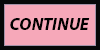
<style>
.page{position:relative;width:100px;height:50px;background:#f6a8b9}
.page>*{position:absolute;margin:0}
.t1{font:17.4px "MyriadPro-BoldIt";color:#000000}
</style>
<div class="page">
<p class="t1" style="left:10px;top:18px;width:80px;height:12px">CONTINUE</p>
</div>
